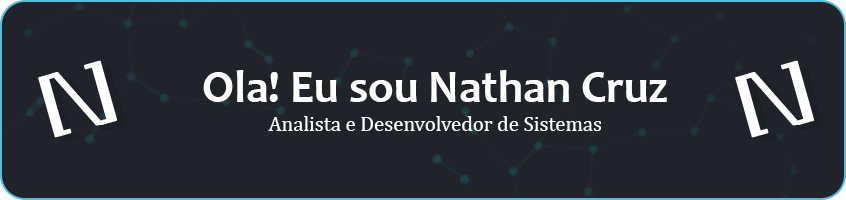
<style>
.page{position:relative;width:846px;height:200px;background:#20232a}
.page>*{position:absolute;margin:0}
.t1{font:66.7px "LucidaBright-Demi";letter-spacing:-0.08em;color:#ffffff;font-weight:bold}
.t2{font:45.8px "Candara-Bold";color:#ffffff}
.t3{font:20.8px "Cambria";color:#ffffff}
</style>
<div class="page">
<p class="t1" style="left:38px;top:60px;width:79px;height:78px;rotate:-16deg">[\]</p>
<p class="t1" style="left:735px;top:60px;width:79px;height:78px;rotate:-16deg">[\]</p>
<p class="t2" style="left:203px;top:70px;width:464px;height:32px">Ola! Eu sou Nathan Cruz</p>
<p class="t3" style="left:268px;top:116px;width:333px;height:15px">Analista e Desenvolvedor de Sistemas</p>
</div>
